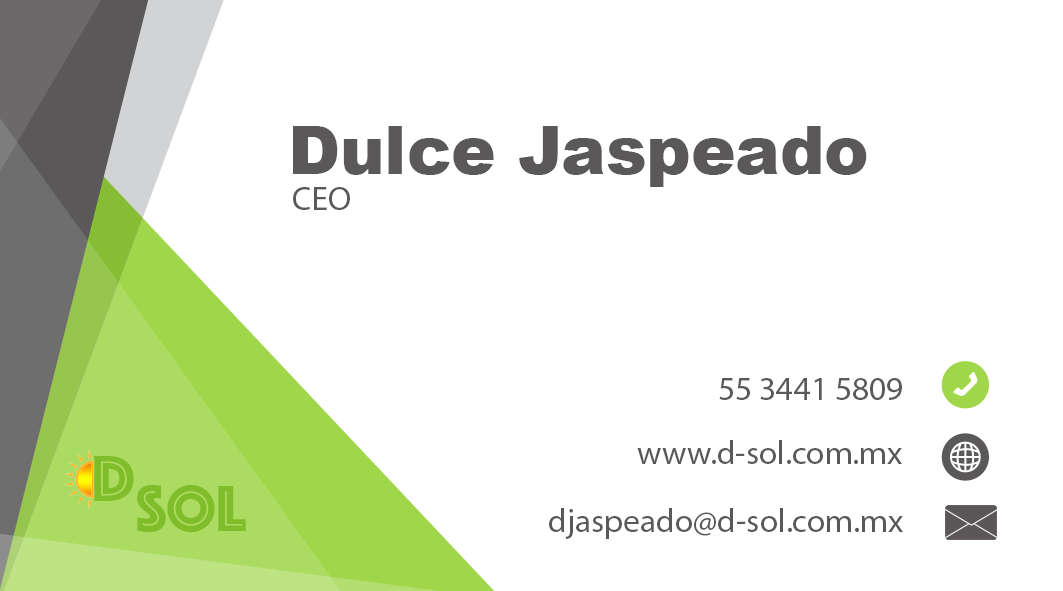
<style>
.page{position:relative;width:1063px;height:591px;background:#ffffff}
.page>*{position:absolute;margin:0}
.t1{font:66.7px "Arial-Black";color:#5a5859}
.t2{font:33.3px "MyriadPro-Regular";color:#5a5859}
.t3{font:67.6px "Phosphate-Inline";color:#80bd2a}
</style>
<div class="page">
<p class="t1" style="left:293px;top:126px;width:574px;height:61px">Dulce Jaspeado</p>
<p class="t2" style="left:293px;top:187px;width:57px;height:23px">CEO</p>
<p class="t2" style="left:719px;top:378px;width:183px;height:22px">55 3441 5809</p>
<p class="t2" style="left:637px;top:440px;width:265px;height:24px">www.d-sol.com.mx</p>
<p class="t3" style="left:94px;top:456px;width:40px;height:45px">D</p>
<p class="t3" style="left:137px;top:485px;width:109px;height:48px">Sol</p>
<p class="t2" style="left:549px;top:508px;width:354px;height:31px">djaspeado@d-sol.com.mx</p>
</div>
